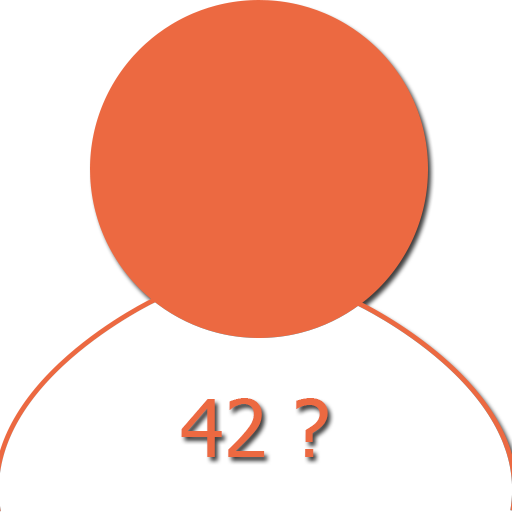
<style>
.page{position:relative;width:512px;height:512px;background:#ffffff}
.page>*{position:absolute;margin:0}
.t1{font:80px "Tahoma";color:#ec6941}
</style>
<div class="page">
<p class="t1" style="left:181px;top:398px;width:147px;height:59px">42 ?</p>
</div>
